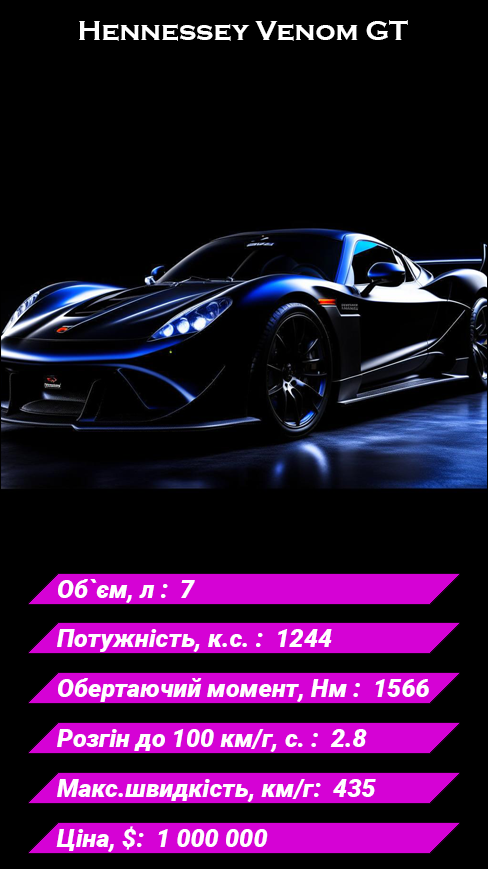
<style>
.page{position:relative;width:488px;height:869px;background:#000000}
.page>*{position:absolute;margin:0}
.t1{font:28px "CopperplateGothic-Bold";color:#ffffff}
.t2{font:25px "Roboto-BlackItalic";color:#ffffff}
</style>
<div class="page">
<p class="t1" style="left:79px;top:20px;width:329px;height:21px">Hennessey Venom GT</p>
<p class="t2" style="left:58px;top:579px;width:137px;height:24px">Об`єм, л :  7</p>
<p class="t2" style="left:57px;top:629px;width:275px;height:23px">Потужність, к.с. :  1244</p>
<p class="t2" style="left:58px;top:678px;width:371px;height:24px">Обертаючий момент, Нм :  1566</p>
<p class="t2" style="left:57px;top:729px;width:310px;height:23px">Розгін до 100 км/г, с. :  2.8</p>
<p class="t2" style="left:57px;top:779px;width:319px;height:23px">Макс.швидкість, км/г:  435</p>
<p class="t2" style="left:56px;top:826px;width:212px;height:26px">Ціна, $:  1 000 000</p>
</div>
